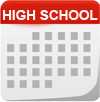
<style>
.page{position:relative;width:100px;height:102px}
.page>*{position:absolute;margin:0}
.t1{font:13.5px "Arial-BoldMT";color:#fafafc}
</style>
<div class="page">
<p class="t1" style="left:3px;top:10px;width:95px;height:10px">HIGH SCHOOL</p>
</div>
